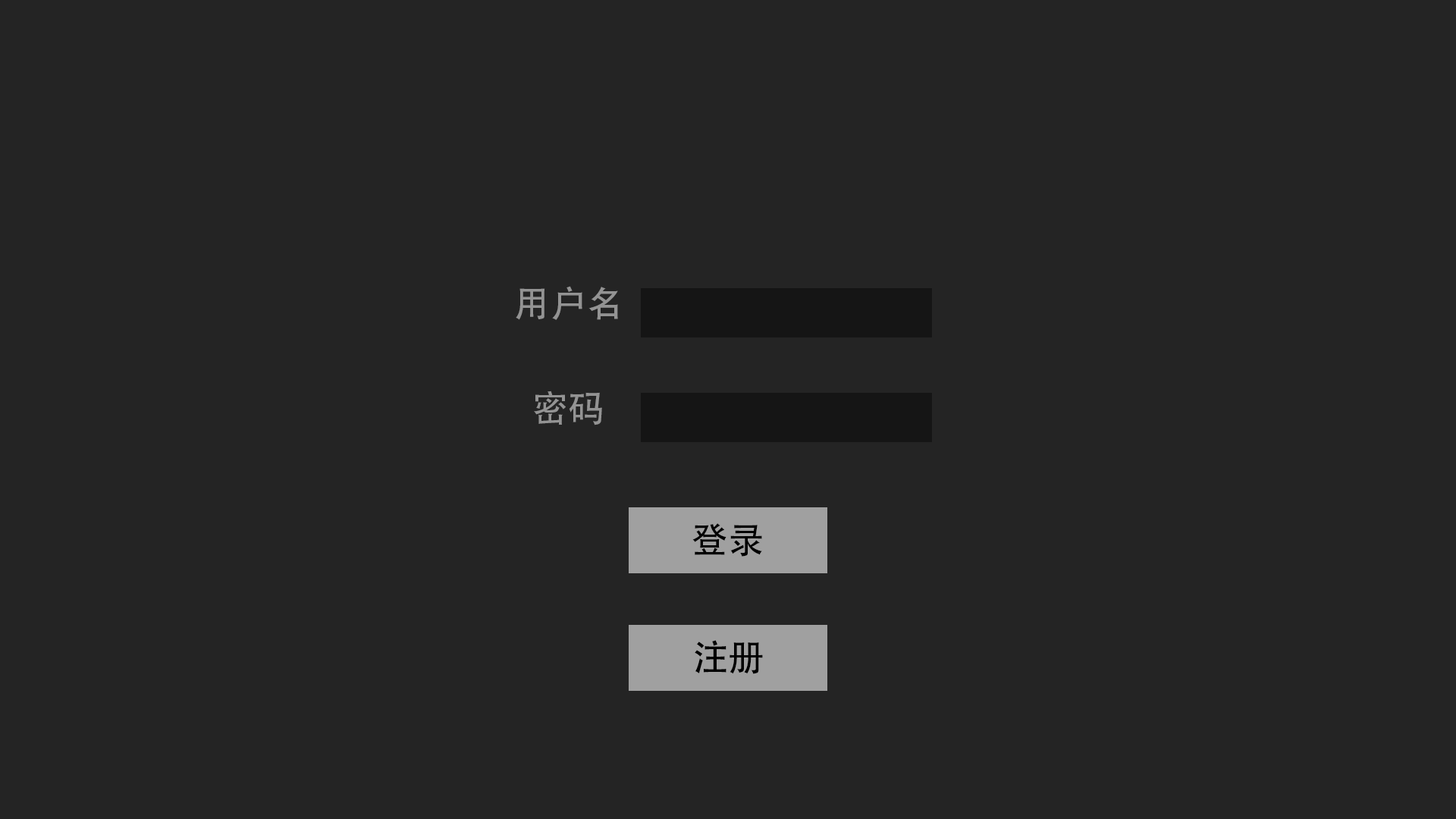
<style>
.page{position:relative;width:1456px;height:819px;background:#242424}
.page>*{position:absolute;margin:0}
.t1{font:36.3px "AdobeHeitiStd-Regular";color:#939393}
.t2{font:36.3px "AdobeHeitiStd-Regular";color:#000000}
</style>
<div class="page">
<p class="t1" style="left:516px;top:286px;width:102px;height:34px">用户名</p>
<p class="t1" style="left:534px;top:391px;width:68px;height:34px">密码</p>
<p class="t2" style="left:692px;top:523px;width:70px;height:34px">登录</p>
<p class="t2" style="left:695px;top:640px;width:68px;height:34px">注册</p>
</div>
